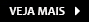
<style>
.page{position:relative;width:89px;height:22px;background:#000000}
.page>*{position:absolute;margin:0}
.t1{font:12px "Candara-Bold";color:#fcfafa}
</style>
<div class="page">
<p class="t1" style="left:9px;top:7px;width:56px;height:8px">VEJA MAIS</p>
</div>
